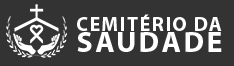
<style>
.page{position:relative;width:234px;height:66px;background:#333333}
.page>*{position:absolute;margin:0}
.t1{font:19.9px "MyriadPro-Bold";letter-spacing:0.08em;color:#ffffff}
.t2{font:29.8px "MyriadPro-Bold";letter-spacing:0.08em;color:#ffffff}
</style>
<div class="page">
<p class="t1" style="left:77px;top:14px;width:145px;height:17px">CEMITÉRIO DA</p>
<p class="t2" style="left:77px;top:32px;width:145px;height:20px">SAUDADE</p>
</div>
